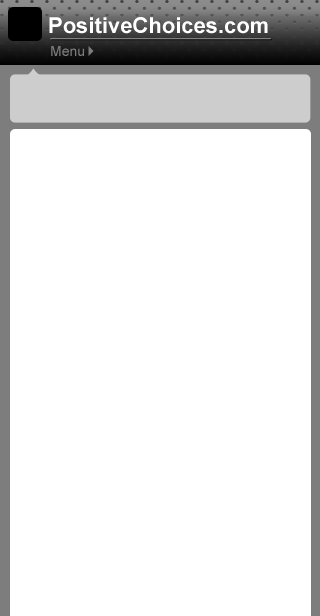
<style>
.page{position:relative;width:320px;height:616px;background:#ffffff}
.page>*{position:absolute;margin:0}
.t1{font:22px "Arial-BoldMT";color:#ffffff}
.t2{font:14px "ArialMT";color:#7d7d7d}
</style>
<div class="page">
<p class="t1" style="left:49px;top:17px;width:219px;height:17px">PositiveChoices.com</p>
<p class="t2" style="left:51px;top:46px;width:33px;height:10px">Menu</p>
</div>
